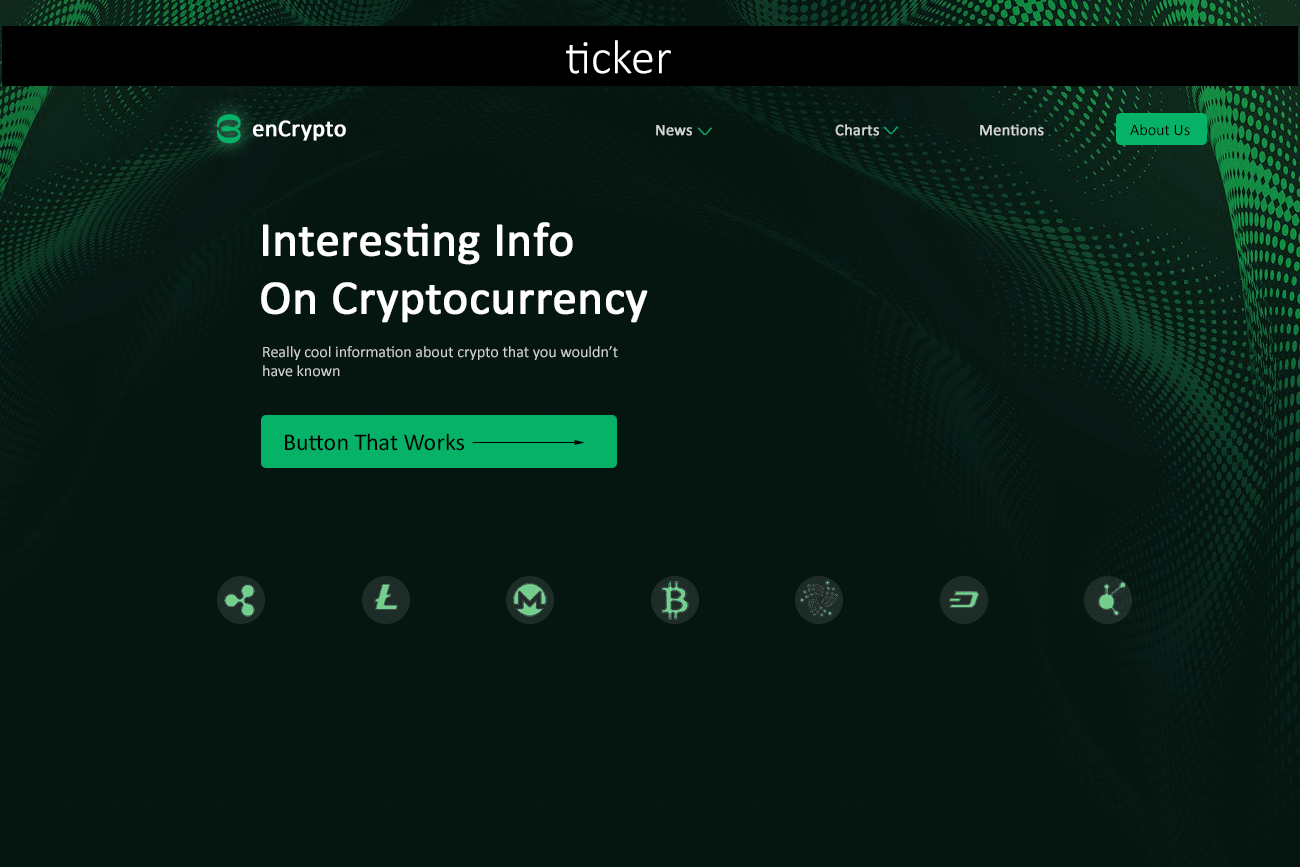
<style>
.page{position:relative;width:1300px;height:867px;background:#051611}
.page>*{position:absolute;margin:0}
.t1{font:48px "Calibri-Light";color:#ffffff}
.t2{font:24px "Calibri";color:#ffffff;font-weight:bold}
.t3{font:16px "Calibri";color:#d3d4d4;font-weight:bold}
.t4{font:11.2px "Calibri-Light";color:#06b267;scale:2.56 1}
.t5{font:16px "Calibri";color:#000000}
.t6{font:48px "Calibri";color:#ffffff;font-weight:bold}
.t7{font:16px "Calibri";color:#d3d4d4}
.t8{font:24px "Calibri";color:#000000}
</style>
<div class="page">
<p class="t1" style="left:566px;top:40px;width:105px;height:34px">ticker</p>
<p class="t2" style="left:253px;top:120px;width:93px;height:21px">enCrypto</p>
<p class="t3" style="left:656px;top:124px;width:388px;height:12px">News    Charts   Mentions</p>
<p class="t4" style="left:883px;top:126px;width:16px;height:8px">V</p>
<p class="t5" style="left:1130px;top:124px;width:60px;height:12px">About Us</p>
<p class="t4" style="left:697px;top:127px;width:16px;height:8px">V</p>
<p class="t6" style="left:261px;top:222px;width:387px;height:101px">Interesting Info <br>On Cryptocurrency</p>
<p class="t7" style="left:263px;top:346px;width:355px;height:31px">Really cool information about crypto that you wouldn’t<br>have known</p>
<p class="t8" style="left:285px;top:433px;width:179px;height:18px">Button That Works</p>
</div>
